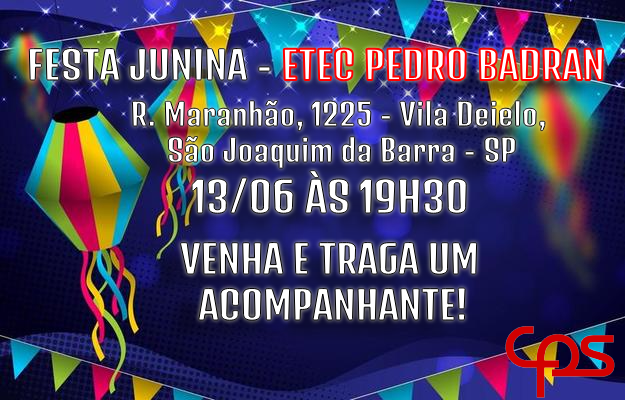
<style>
.page{position:relative;width:625px;height:400px}
.page>*{position:absolute;margin:0}
.t1{font:38px "DenkOne-Regular"}
.t2{font:30px "DenkOne-Regular"}
.t3{font:41px "DenkOne-Regular";color:#ffffff}
.t4{font:38px "DenkOne-Regular";color:#ffffff}
</style>
<div class="page">
<p class="t1" style="left:27px;top:46px;width:578px;height:37px">FESTA JUNINA - ETEC PEDRO BADRAN</p>
<p class="t2" style="left:131px;top:99px;width:415px;height:71px">R. Maranhão, 1225 - Vila Deielo,<br>   São Joaquim da Barra - SP</p>
<p class="t3" style="left:191px;top:169px;width:277px;height:46px">13/06 ÀS 19H30</p>
<p class="t4" style="left:179px;top:241px;width:299px;height:81px">VENHA E TRAGA UM<br>  ACOMPANHANTE!</p>
</div>
